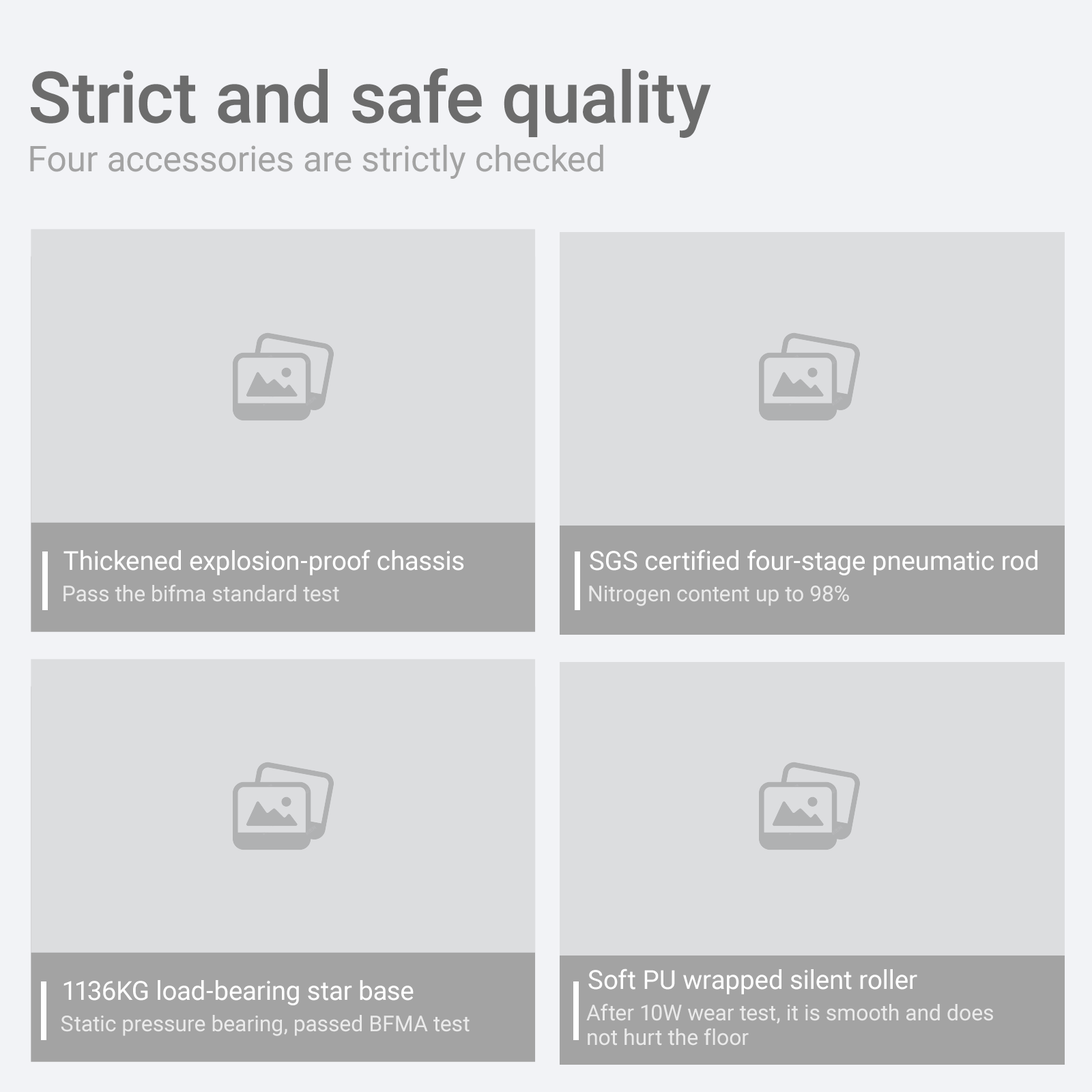
<style>
.page{position:relative;width:1092px;height:1092px;background:#dcdddf}
.page>*{position:absolute;margin:0}
.t1{font:71.3px "Roboto-Medium";color:#6c6c6c}
.t2{font:35.5px "Roboto-Regular";color:#a3a3a3}
.t3{font:26.2px "Roboto-Regular";color:#ffffff}
.t4{font:21.8px "Roboto-Regular";color:#ffffff}
.t5{font:21.8px/24.6px "Roboto-Regular";color:#ffffff}
</style>
<div class="page">
<p class="t1" style="left:31px;top:68px;width:680px;height:70px">Strict and safe quality</p>
<p class="t2" style="left:30px;top:145px;width:573px;height:34px">Four accessories are strictly checked</p>
<p class="t3" style="left:63px;top:549px;width:401px;height:26px">Thickened explosion-proof chassis</p>
<p class="t3" style="left:590px;top:549px;width:447px;height:26px">SGS certified four-stage pneumatic rod</p>
<p class="t4" style="left:63px;top:584px;width:276px;height:18px;opacity:0.75">Pass the bifma standard test</p>
<p class="t4" style="left:589px;top:586px;width:260px;height:20px;opacity:0.75">Nitrogen content up to 98%</p>
<p class="t3" style="left:588px;top:968px;width:329px;height:26px">Soft PU wrapped silent roller</p>
<p class="t3" style="left:63px;top:980px;width:351px;height:25px">1136KG load-bearing star base</p>
<p class="t5" style="left:586px;top:1003px;width:407px;height:43px;opacity:0.75">After 10W wear test, it is smooth and does<br>not hurt the floor</p>
<p class="t4" style="left:61px;top:1015px;width:409px;height:21px;opacity:0.75">Static pressure bearing, passed BFMA test</p>
</div>
